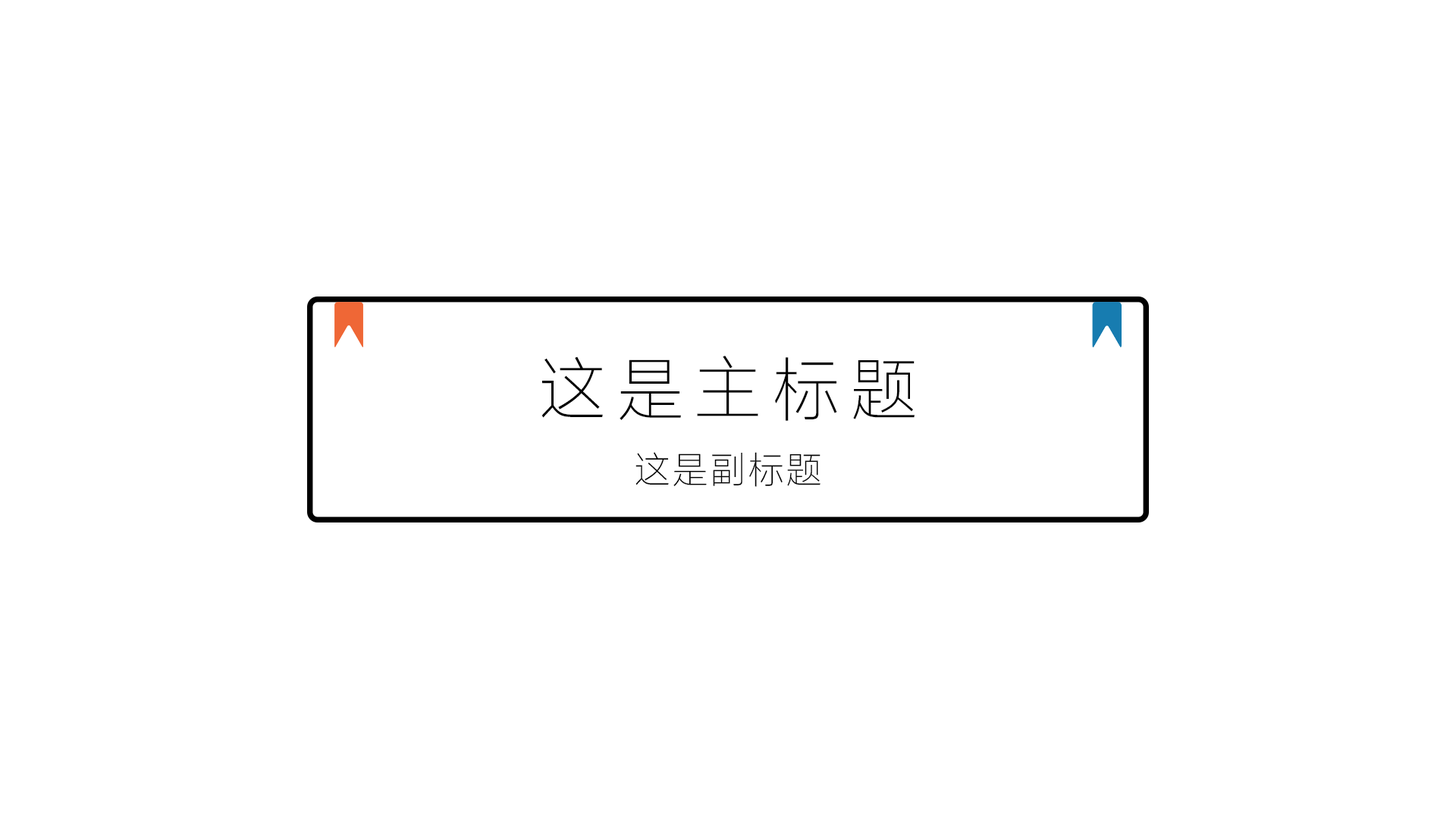
<style>
.page{position:relative;width:1456px;height:819px;background:#ffffff}
.page>*{position:absolute;margin:0}
.t1{font:70.8px "MiSans-ExtraLight";letter-spacing:0.1em;color:#000000}
.t2{font:37.9px "MiSans-ExtraLight";color:#000000}
</style>
<div class="page">
<p class="t1" style="left:541px;top:356px;width:374px;height:65px">这是主标题</p>
<p class="t2" style="left:635px;top:452px;width:186px;height:35px">这是副标题</p>
</div>
